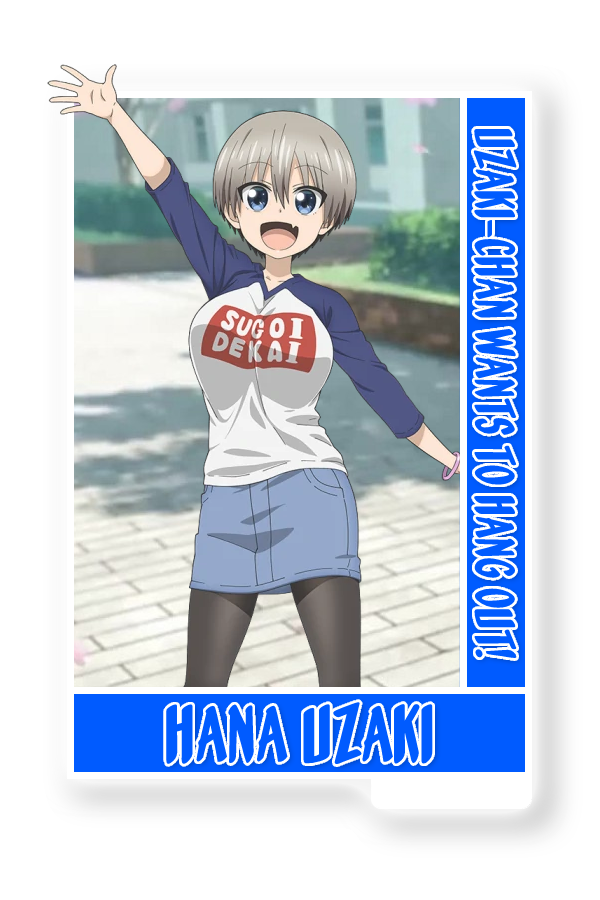
<style>
.page{position:relative;width:600px;height:900px;background:#ffffff}
.page>*{position:absolute;margin:0}
.t1{font:48.8px "OrangeFizz";color:#005bff}
.t2{font:70.8px "OrangeFizz";color:#005bff}
</style>
<div class="page">
<p class="t1" style="left:473px;top:128px;width:44px;height:530px;rotate:90deg">Uzaki-chan wants to hang out!</p>
<p class="t2" style="left:166px;top:702px;width:267px;height:63px">HANA UZAKI</p>
</div>
